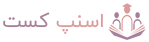
<style>
.page{position:relative;width:149px;height:42px;background:#ffffff}
.page>*{position:absolute;margin:0}
.t1{font:20px "IRANYekanRDWeb"}
</style>
<div class="page">
<p class="t1" style="left:3px;top:12px;width:100px;height:22px">اسنپ کست</p>
</div>
